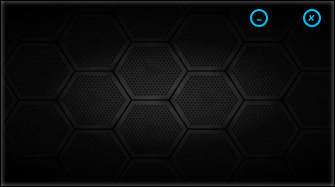
<style>
.page{position:relative;width:335px;height:187px}
.page>*{position:absolute;margin:0}
.t1{font:10.1px "SegoePrint-Bold";color:#0ac3f6}
.t2{font:10.1px "SegoePrint-Bold"}
</style>
<div class="page">
<p class="t1" style="left:308px;top:15px;width:7px;height:6px">x</p>
<p class="t2" style="left:257px;top:19px;width:5px;height:2px">-</p>
</div>
